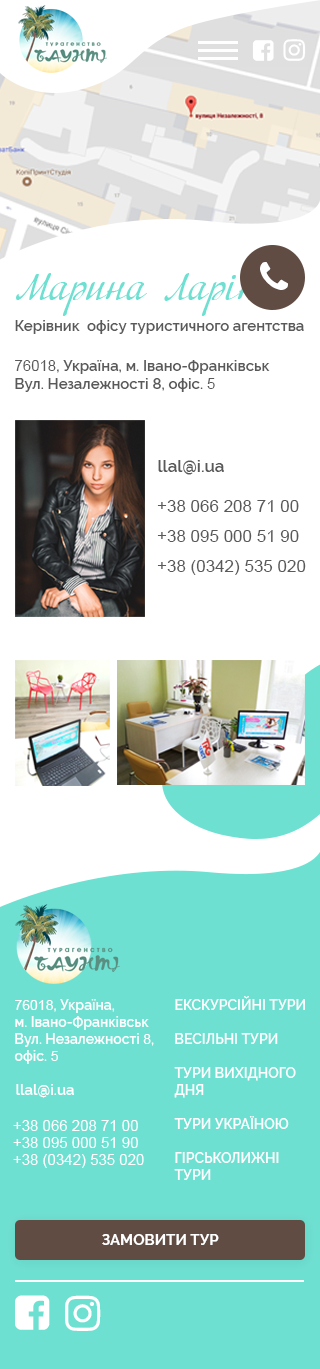
<style>
.page{position:relative;width:320px;height:1369px;background:#ffffff}
.page>*{position:absolute;margin:0}
.t1{font:40px "Adventure";color:#6ee0d2}
.t2{font:15px "Raleway-SemiBold";color:#5a5959}
.t3{font:15px "ArialMT";color:#5a5959}
.t4{font:17px "Raleway-SemiBold";color:#5a5959}
.t5{font:17px/30px "ArialMT";color:#5a5959}
.t6{font:14px/17px "Raleway-SemiBold";color:#ffffff}
.t7{font:14px/17px "ArialMT";color:#ffffff}
.t8{font:20px/22px "Raleway-Bold";color:#ffffff}
.t9{font:15px "Raleway-SemiBold";color:#ffffff}
.t10{font:15px/17px "ArialMT";color:#ffffff}
.t11{font:15px "Raleway-Bold";color:#ffffff}
</style>
<div class="page">
<p class="t1" style="left:16px;top:273px;width:262px;height:43px">Марина Ларіна</p>
<p class="t2" style="left:15px;top:320px;width:289px;height:14px">Керівник  офісу туристичного агентства</p>
<p class="t2" style="left:15px;top:360px;width:255px;height:32px"><span class="t3">76018</span>, Україна, м. Івано-Франківськ<br>Вул. Незалежності 8, офіс. <span class="t3">5</span></p>
<p class="t4" style="left:158px;top:460px;width:66px;height:15px">llal@i.ua</p>
<p class="t5" style="left:157px;top:500px;width:149px;height:75px">+38 066 208 71 00<br>+38 095 000 51 90<br>+38 (0342) 535 020</p>
<p class="t6" style="left:14px;top:999px;width:140px;height:65px"><span class="t7">76018</span>, Україна, <br>м. Івано-Франківськ<br>Вул. Незалежності <span class="t7">8</span>, <br>офіс.<span class="t7"> 5</span></p>
<p class="t6" style="left:174px;top:996px;width:131px;height:184px"><span class="t8"><br><br><br></span>ЕКСКУРСІЙНІ ТУРИ<br><br>ВЕСІЛЬНІ ТУРИ<br><br>ТУРИ ВИХІДНОГО <br>ДНЯ<br><br>ТУРИ УКРАЇНОЮ<br><br>ГІРСЬКОЛИЖНІ <br>ТУРИ</p>
<p class="t9" style="left:16px;top:1084px;width:58px;height:14px">llal@i.ua</p>
<p class="t10" style="left:13px;top:1120px;width:131px;height:48px">+38 066 208 71 00<br>+38 095 000 51 90<br>+38 (0342) 535 020</p>
<p class="t11" style="left:102px;top:1234px;width:117px;height:11px">ЗАМОВИТИ ТУР</p>
</div>
